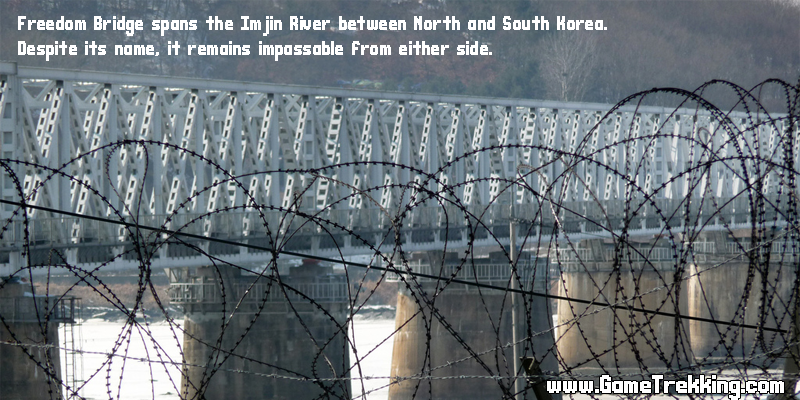
<style>
.page{position:relative;width:800px;height:400px}
.page>*{position:absolute;margin:0}
.t1{font:11px "CasualEncounter";color:#ffffff}
.t2{font:14.1px/30.7px "CasualEncounter";color:#ffffff}
</style>
<div class="page">
<p class="t1" style="left:18px;top:16px;width:589px;height:20px">Freedom Bridge spans the Imjin River between North and South Korea.</p>
<p class="t1" style="left:18px;top:41px;width:474px;height:20px">Despite its name, it remains impassable from either side.</p>
<p class="t2" style="left:547px;top:375px;width:237px;height:25px;text-align:right">www.GameTrekking.com</p>
</div>
